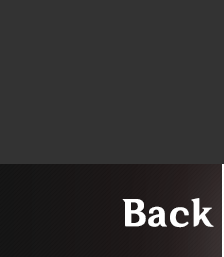
<style>
.page{position:relative;width:224px;height:257px;background:#333333}
.page>*{position:absolute;margin:0}
.t1{font:35px "Default_SC-85W";color:#ffffff}
</style>
<div class="page">
<p class="t1" style="left:122px;top:198px;width:92px;height:30px">Back</p>
</div>
